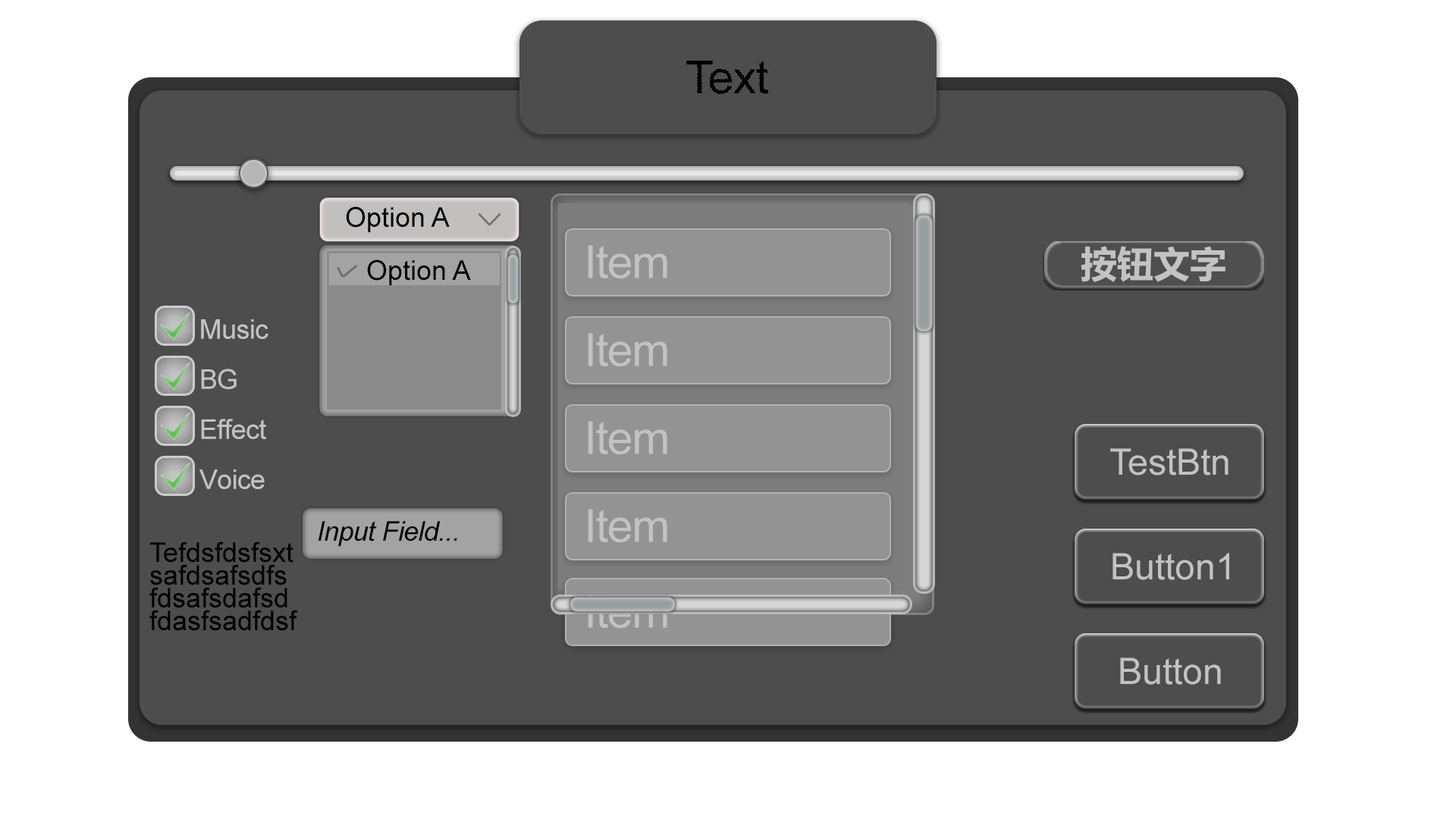
<style>
.page{position:relative;width:1456px;height:819px;background:#4d4d4d}
.page>*{position:absolute;margin:0}
.t1{font:45.5px "ArialMT";color:#000000}
.t2{font:27.3px "ArialMT";color:#000000}
.t3{font:45.5px "ArialMT";letter-spacing:-0.02em;color:#c2c2c2}
.t4{font:27.3px "ArialMT";letter-spacing:-0.02em;color:#c2c2c2}
.t5{font:36.4px "ArialMT";color:#c2c2c2}
.t6{font:27.3px "Arial-ItalicMT";letter-spacing:-0.02em;color:#050505}
.t7{font:27.3px/22.7px "ArialMT";color:#000000}
.t8{font:45.5px "ArialMT";letter-spacing:-0.02em}
</style>
<div class="page">
<p class="t1" style="left:686px;top:61px;width:82px;height:33px">Text</p>
<p class="t2" style="left:346px;top:206px;width:104px;height:27px">Option A</p>
<p class="t3" style="left:588px;top:245px;width:79px;height:34px">Item</p>
<p class="t2" style="left:367px;top:259px;width:104px;height:27px">Option A</p>
<p class="t4" style="left:201px;top:319px;width:67px;height:20px">Music</p>
<p class="t3" style="left:588px;top:333px;width:79px;height:34px">Item</p>
<p class="t4" style="left:201px;top:369px;width:36px;height:21px">BG</p>
<p class="t4" style="left:201px;top:419px;width:65px;height:20px">Effect</p>
<p class="t3" style="left:588px;top:421px;width:79px;height:34px">Item</p>
<p class="t5" style="left:1110px;top:448px;width:118px;height:27px">TestBtn</p>
<p class="t4" style="left:199px;top:469px;width:66px;height:20px">Voice</p>
<p class="t3" style="left:588px;top:509px;width:79px;height:34px">Item</p>
<p class="t6" style="left:318px;top:521px;width:139px;height:26px">Input Field...</p>
<p class="t7" style="left:149px;top:541px;width:149px;height:90px">Tefdsfdsfsxt<br>safdsafsdfs<br>fdsafsdafsd<br>fdasfsadfdsf</p>
<p class="t5" style="left:1112px;top:553px;width:117px;height:27px">Button1</p>
<p class="t8" style="left:588px;top:595px;width:79px;height:34px">Item</p>
<p class="t5" style="left:1120px;top:657px;width:101px;height:28px">Button</p>
</div>
